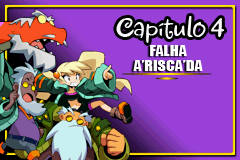
<style>
.page{position:relative;width:240px;height:160px;background:#9840d8}
.page>*{position:absolute;margin:0}
.t1{font:32px "Jewels";color:#f8f8f8;scale:0.95 1}
.t2{font:14.2px "Impact";color:#ffffff;scale:1.13 1}
</style>
<div class="page">
<p class="t1" style="left:116px;top:16px;width:109px;height:27px">Capítulo 4</p>
<p class="t2" style="left:150px;top:45px;width:37px;height:11px">FALHA</p>
<p class="t2" style="left:133px;top:60px;width:70px;height:11px">A’RISCA’DA</p>
</div>
